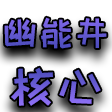
<style>
.page{position:relative;width:112px;height:112px}
.page>*{position:absolute;margin:0}
.t1{font:36px "HappyZcool-2016";color:#675bd3}
.t2{font:48px "HappyZcool-2016";color:#675bd3}
</style>
<div class="page">
<p class="t1" style="left:4px;top:17px;width:103px;height:89px;text-align:center">幽能井<br><span class="t2">核心</span></p>
</div>
